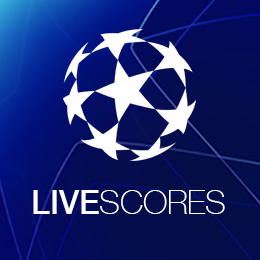
<style>
.page{position:relative;width:260px;height:260px}
.page>*{position:absolute;margin:0}
.t1{font:32.5px "HelveticaNeue-Thin";color:#ffffff}
.t2{font:32.5px "HelveticaNeue-Medium";color:#ffffff}
</style>
<div class="page">
<p class="t1" style="left:33px;top:190px;width:192px;height:24px"><span class="t2">LIVE</span>SCORES</p>
</div>
